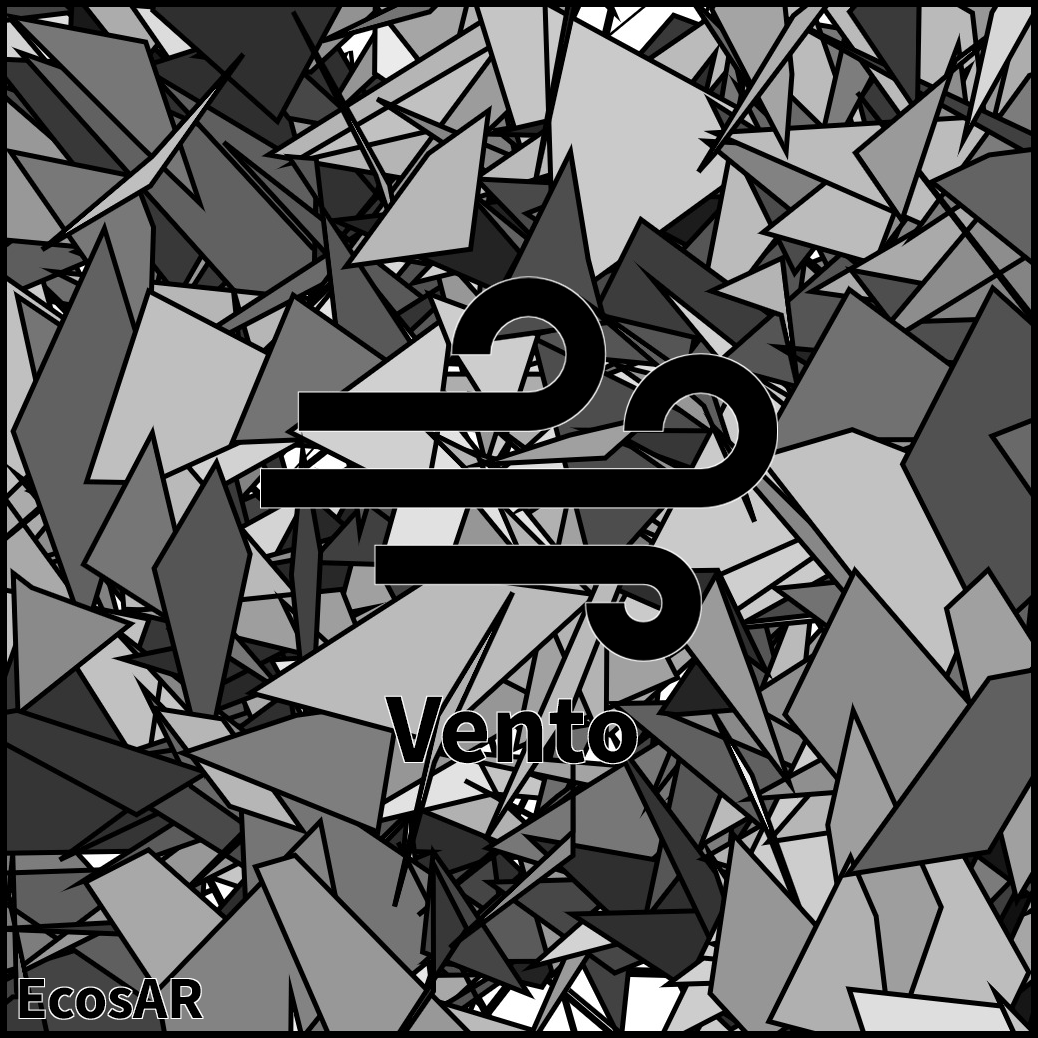
<style>
.page{position:relative;width:1038px;height:1038px}
.page>*{position:absolute;margin:0}
.t1{font:100px "SourceSansRoman-Bold";color:#000000}
.t2{font:60px "SourceSansRoman-Bold";color:#000000}
</style>
<div class="page">
<p class="t1" style="left:385px;top:696px;width:252px;height:68px">Vento</p>
<p class="t2" style="left:19px;top:979px;width:184px;height:40px">EcosAR</p>
</div>
